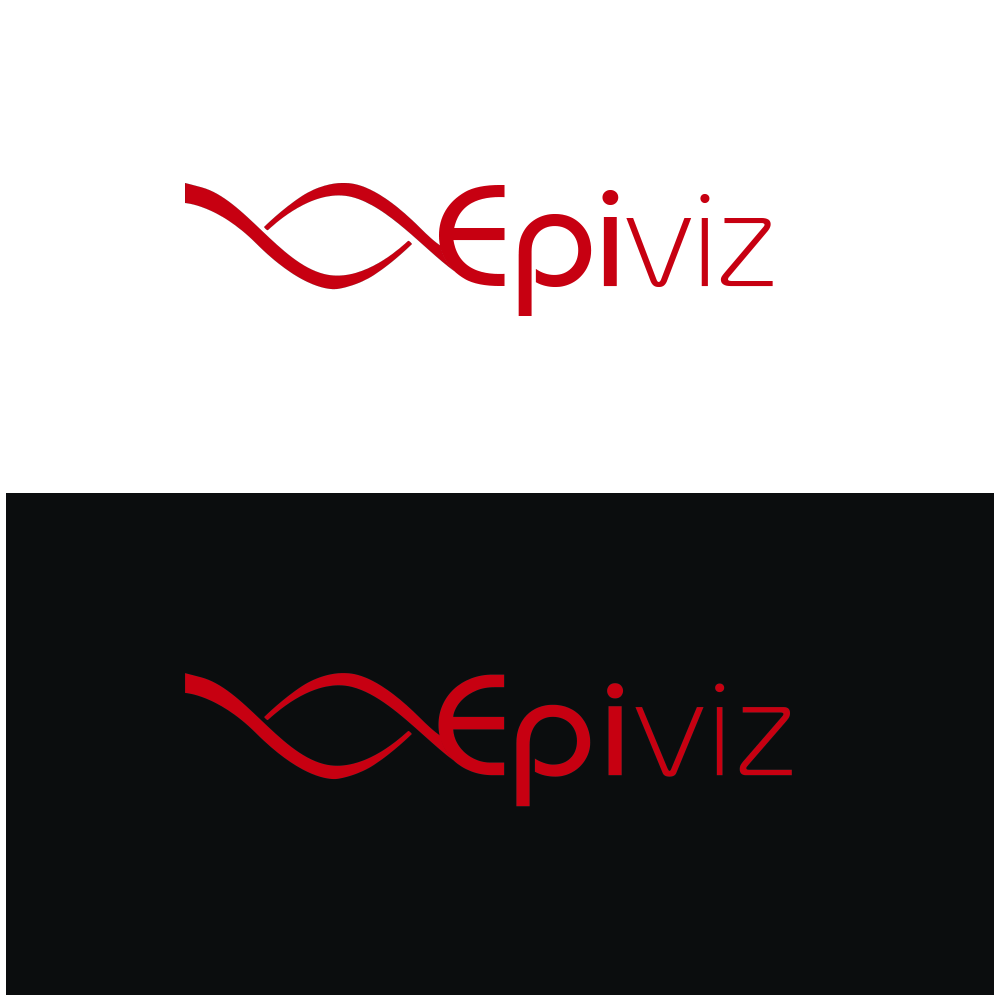
<style>
.page{position:relative;width:1000px;height:1000px;background:#ffffff}
.page>*{position:absolute;margin:0}
.t1{font:143.8px "BauhausITCbyBT-Medium";color:#c70011;scale:1.05 1}
.t2{font:143.8px "BauhausITCbyBT-Light";color:#c70011;scale:1.05 1}
</style>
<div class="page">
<p class="t1" style="left:439px;top:185px;width:334px;height:131px">Epi<span class="t2">viz</span></p>
</div>
